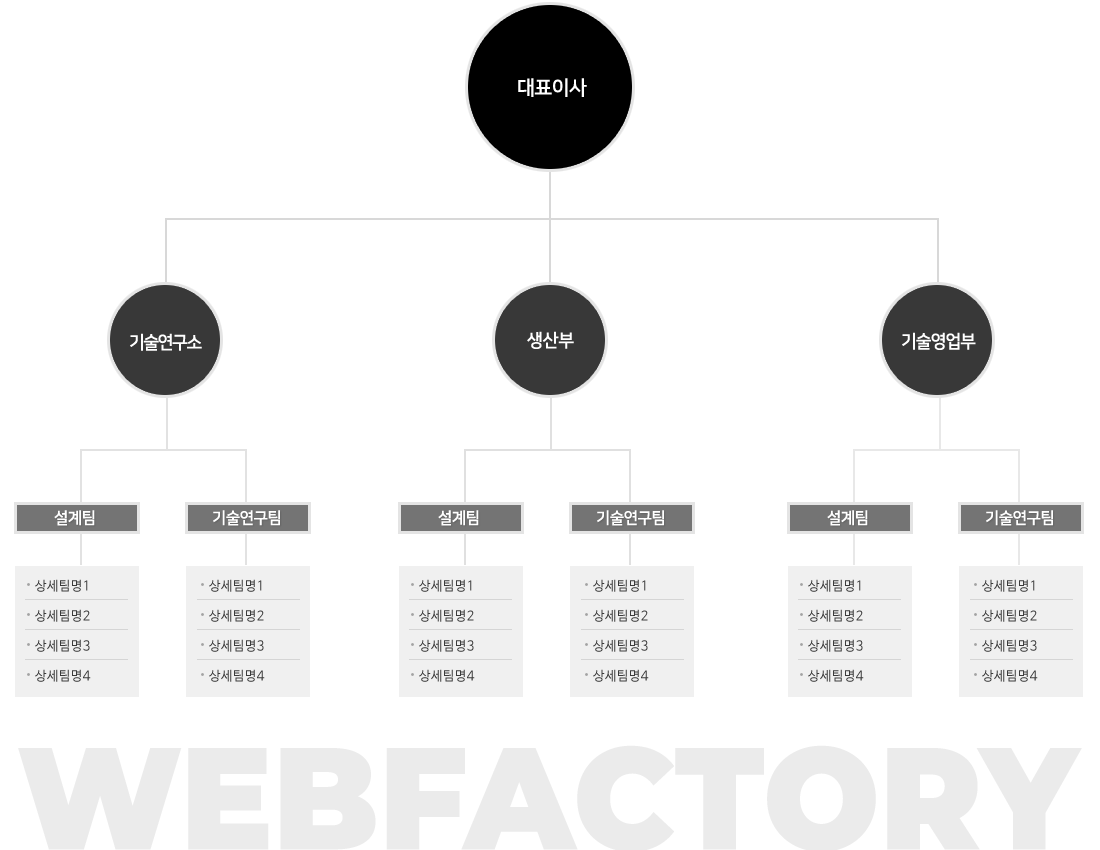
<style>
.page{position:relative;width:1100px;height:850px;background:#ffffff}
.page>*{position:absolute;margin:0}
.t1{font:20px "NanumSquareB";letter-spacing:-0.025em;color:#ffffff}
.t2{font:18px "NanumSquareB";letter-spacing:-0.075em;color:#ffffff;scale:0.96 1}
.t3{font:18px "NanumSquareB";letter-spacing:-0.025em;color:#ffffff}
.t4{font:18px "NanumSquareB";letter-spacing:-0.05em;color:#ffffff;scale:0.96 1}
.t5{font:16px "NanumSquareB";letter-spacing:-0.025em;color:#ffffff}
.t6{font:13px/30px "NanumBarunGothic";letter-spacing:0.025em;color:#3b3b3b}
.t7{font:144.5px "Montserrat-Black";color:#ebebeb;text-transform:uppercase;scale:0.95 1}
</style>
<div class="page">
<p class="t1" style="left:518px;top:78px;width:69px;height:19px">대표이사</p>
<p class="t2" style="left:130px;top:333px;width:72px;height:18px">기술연구소</p>
<p class="t3" style="left:527px;top:331px;width:47px;height:18px">생산부</p>
<p class="t4" style="left:902px;top:332px;width:74px;height:18px">기술영업부</p>
<p class="t5" style="left:54px;top:510px;width:41px;height:16px">설계팀</p>
<p class="t5" style="left:213px;top:510px;width:67px;height:16px">기술연구팀</p>
<p class="t5" style="left:438px;top:510px;width:41px;height:16px">설계팀</p>
<p class="t5" style="left:597px;top:510px;width:67px;height:16px">기술연구팀</p>
<p class="t5" style="left:827px;top:510px;width:41px;height:16px">설계팀</p>
<p class="t5" style="left:986px;top:510px;width:67px;height:16px">기술연구팀</p>
<p class="t6" style="left:35px;top:579px;width:56px;height:103px">상세팀명1<br>상세팀명2<br>상세팀명3<br>상세팀명4</p>
<p class="t6" style="left:209px;top:579px;width:56px;height:103px">상세팀명1<br>상세팀명2<br>상세팀명3<br>상세팀명4</p>
<p class="t6" style="left:419px;top:579px;width:56px;height:103px">상세팀명1<br>상세팀명2<br>상세팀명3<br>상세팀명4</p>
<p class="t6" style="left:593px;top:579px;width:56px;height:103px">상세팀명1<br>상세팀명2<br>상세팀명3<br>상세팀명4</p>
<p class="t6" style="left:808px;top:579px;width:56px;height:103px">상세팀명1<br>상세팀명2<br>상세팀명3<br>상세팀명4</p>
<p class="t6" style="left:982px;top:579px;width:56px;height:103px">상세팀명1<br>상세팀명2<br>상세팀명3<br>상세팀명4</p>
<p class="t7" style="left:18px;top:745px;width:1064px;height:107px">webfactory</p>
</div>
